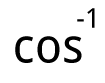
<style>
.page{position:relative;width:105px;height:83px;background:#ffffff}
.page>*{position:absolute;margin:0}
.t1{font:27.2px "DroidSans";color:#000000}
.t2{font:47.9px "DroidSans";color:#000000}
</style>
<div class="page">
<p class="t1" style="left:77px;top:8px;width:18px;height:20px">-1</p>
<p class="t2" style="left:15px;top:36px;width:67px;height:27px">cos</p>
</div>
